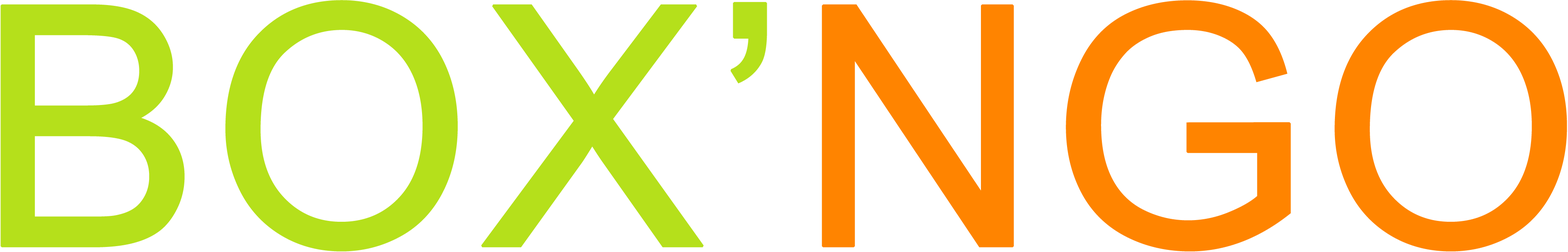
<style>
.page{position:relative;width:1568px;height:252px;background:#ffffff}
.page>*{position:absolute;margin:0}
.t1{font:335.9px "ArialMT";color:#b5e01b;font-weight:bold}
.t2{font:335.9px "ArialMT";color:#ff8400;font-weight:bold}
</style>
<div class="page">
<p class="t1" style="left:0px;top:0px;width:1567px;height:252px">BOX’<span class="t2">NGO</span></p>
</div>
